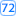
<style>
.page{position:relative;width:16px;height:16px;background:#ffffff}
.page>*{position:absolute;margin:0}
.t1{font:12.9px "MyriadPro-Semibold";color:#0279ff}
</style>
<div class="page">
<p class="t1" style="left:2px;top:3px;width:13px;height:9px">72</p>
</div>
